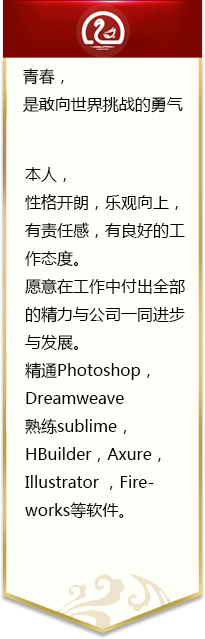
<style>
.page{position:relative;width:205px;height:639px;background:#fffef8}
.page>*{position:absolute;margin:0}
.t1{font:16px "MicrosoftYaHei";color:#000000}
.t2{font:12px "MicrosoftYaHei";color:#000000}
</style>
<div class="page">
<p class="t1" style="left:23px;top:68px;width:160px;height:45px">青春，<br>是敢向世界挑战的勇气。</p>
<p class="t2" style="left:25px;top:167px;width:160px;height:352px">本人，<br>性格开朗，乐观向上，<br>有责任感，有良好的工作态度。<br>愿意在工作中付出全部的精力与公司一同进步与发展。<br>精通Photoshop，Dreamweave<br>熟练sublime，HBuilder，Axure，Illustrator ，Fireworks等软件。</p>
</div>
